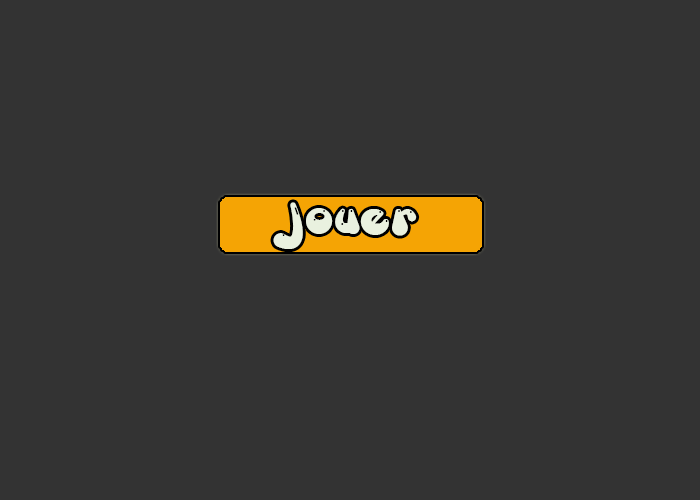
<style>
.page{position:relative;width:700px;height:500px;background:#333333}
.page>*{position:absolute;margin:0}
.t1{font:33px "GretoonHighlight";letter-spacing:0.1em;color:#e9f1df}
</style>
<div class="page">
<p class="t1" style="left:273px;top:202px;width:144px;height:47px">Jouer</p>
</div>
